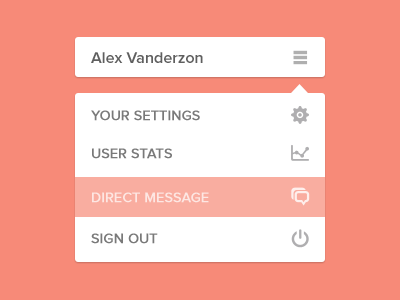
<style>
.page{position:relative;width:400px;height:300px;background:#f78a78}
.page>*{position:absolute;margin:0}
.t1{font:16px "ProximaNova-Semibold";color:#5f5f5f}
.t2{font:14px "ProximaNova-Regular";color:#6a6a6a;text-transform:uppercase;font-weight:bold}
.t3{font:14px "ProximaNova-Regular";color:#fde7e3;text-transform:uppercase;font-weight:bold}
</style>
<div class="page">
<p class="t1" style="left:91px;top:52px;width:112px;height:11px">Alex Vanderzon</p>
<p class="t2" style="left:91px;top:110px;width:109px;height:11px;opacity:0.9">YOur settings</p>
<p class="t2" style="left:92px;top:148px;width:80px;height:11px;opacity:0.9">User Stats</p>
<p class="t3" style="left:92px;top:192px;width:117px;height:11px">Direct Message</p>
<p class="t2" style="left:91px;top:233px;width:67px;height:11px;opacity:0.9">sign out</p>
</div>
